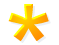
<style>
.page{position:relative;width:59px;height:45px;background:#ffffff}
.page>*{position:absolute;margin:0}
.t1{font:122.7px "ArialMT"}
</style>
<div class="page">
<p class="t1" style="left:8px;top:4px;width:41px;height:37px">*</p>
</div>
